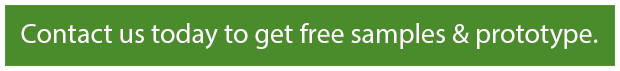
<style>
.page{position:relative;width:620px;height:71px;background:#4a8b2c}
.page>*{position:absolute;margin:0}
.t1{font:28px "MingLiU";color:#fdf9fb}
</style>
<div class="page">
<p class="t1" style="left:21px;top:23px;width:577px;height:26px">Contact us today to get free samples &amp; prototype.</p>
</div>
